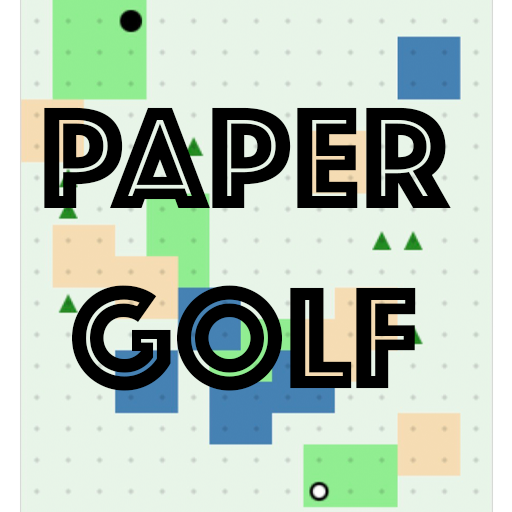
<style>
.page{position:relative;width:512px;height:512px}
.page>*{position:absolute;margin:0}
.t1{font:150px "Phosphate-Inline";color:#000000}
</style>
<div class="page">
<p class="t1" style="left:44px;top:107px;width:407px;height:284px;text-align:center">PAPER GOLF</p>
</div>
